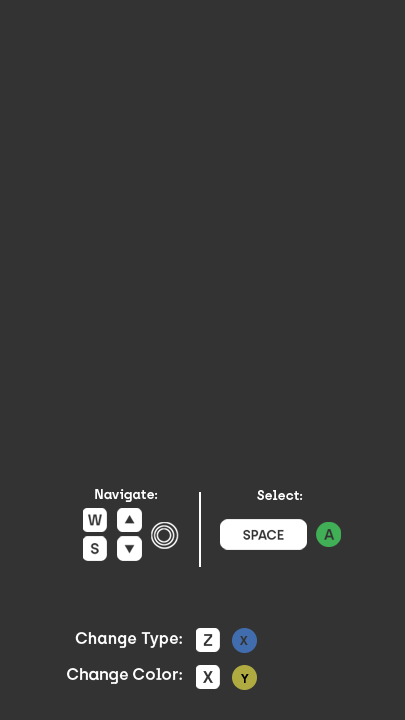
<style>
.page{position:relative;width:405px;height:720px;background:#333333}
.page>*{position:absolute;margin:0}
.t1{font:13.1px "Archia-SemiBold";color:#ffffff}
.t2{font:13.1px "Archia-SemiBold";color:#fefefe}
.t3{font:16px/36px "Archia-SemiBold";color:#fefefe}
.t4{font:12px "Archia-SemiBold";color:#000000}
</style>
<div class="page">
<p class="t1" style="left:95px;top:489px;width:63px;height:13px">Navigate:</p>
<p class="t2" style="left:257px;top:490px;width:46px;height:10px">Select:</p>
<p class="t3" style="left:67px;top:632px;width:115px;height:52px;text-align:right">Change Type:<br>Change Color:</p>
<p class="t4" style="left:241px;top:674px;width:8px;height:9px">Y</p>
</div>
